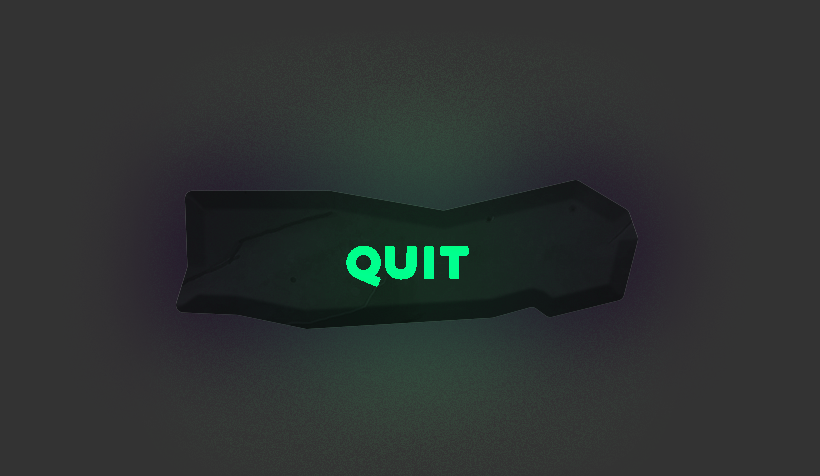
<style>
.page{position:relative;width:820px;height:476px;background:#333333}
.page>*{position:absolute;margin:0}
.t1{font:47.1px "Aquino-Demo";color:#00ff8d;text-transform:uppercase}
</style>
<div class="page">
<p class="t1" style="left:346px;top:246px;width:123px;height:41px">QUIT</p>
<p class="t1" style="left:346px;top:246px;width:123px;height:41px">QUIT</p>
</div>
